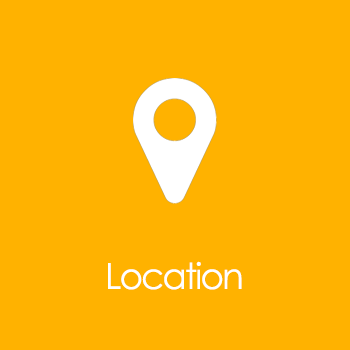
<style>
.page{position:relative;width:350px;height:350px;background:#ffb200}
.page>*{position:absolute;margin:0}
.t1{font:36px "CenturyGothic";letter-spacing:-0.05em;color:#ffffff}
</style>
<div class="page">
<p class="t1" style="left:108px;top:261px;width:134px;height:29px">Location</p>
</div>
